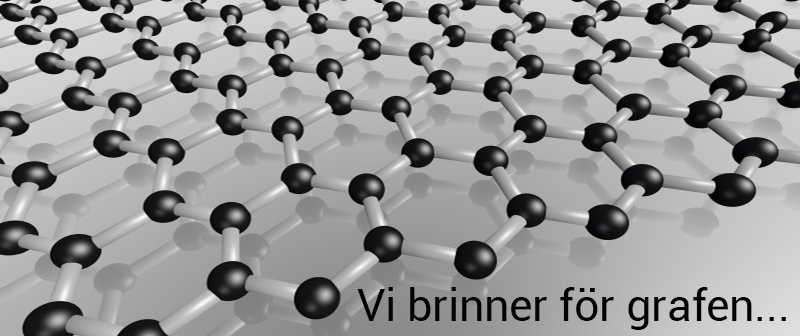
<style>
.page{position:relative;width:800px;height:336px}
.page>*{position:absolute;margin:0}
.t1{font:44.6px "Roboto-Regular";color:#030303}
</style>
<div class="page">
<p class="t1" style="left:357px;top:287px;width:429px;height:43px">Vi brinner för grafen...</p>
</div>
